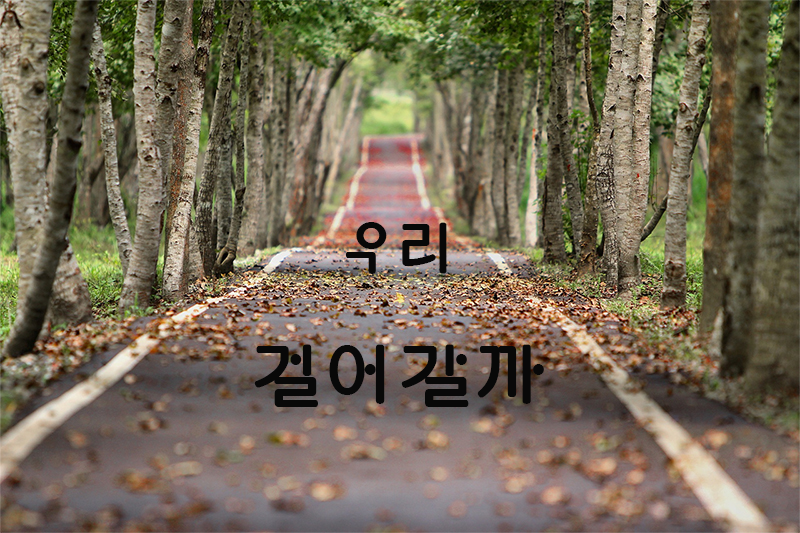
<style>
.page{position:relative;width:800px;height:533px}
.page>*{position:absolute;margin:0}
.t1{font:70px/130px "Gugi-Regular";letter-spacing:0.1em;color:#080808}
.t2{font:60px/130px "Gugi-Regular";letter-spacing:0.1em;color:#080808}
</style>
<div class="page">
<p class="t1" style="left:254px;top:222px;width:290px;height:185px;text-align:center"><span class="t2">우리<br></span>걸어갈까</p>
</div>
